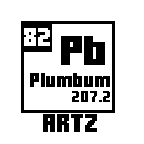
<style>
.page{position:relative;width:144px;height:144px;background:#ffffff}
.page>*{position:absolute;margin:0}
.t1{font:18px "MinercraftoryRegular";color:#ffffff}
.t2{font:30px "MinercraftoryRegular";color:#000000}
.t3{font:14px "MinercraftoryRegular";color:#000000}
.t4{font:11px "MinercraftoryRegular";color:#000000}
.t5{font:18px "MinercraftoryRegular";color:#000000}
</style>
<div class="page">
<p class="t1" style="left:24px;top:28px;width:26px;height:18px">82</p>
<p class="t2" style="left:61px;top:36px;width:44px;height:29px">Pb</p>
<p class="t3" style="left:30px;top:73px;width:80px;height:14px">Plumbum</p>
<p class="t4" style="left:72px;top:91px;width:38px;height:11px">207.2</p>
<p class="t5" style="left:43px;top:114px;width:54px;height:18px">ARTZ</p>
</div>
